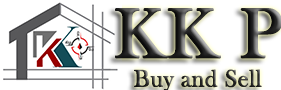
<style>
.page{position:relative;width:281px;height:90px;background:#ffffff}
.page>*{position:absolute;margin:0}
.t1{font:72.7px "BaskOldFace";font-weight:bold}
.t2{font:24.2px "BaskOldFace";color:#282828;font-weight:bold}
</style>
<div class="page">
<p class="t1" style="left:115px;top:8px;width:168px;height:51px">KK P</p>
<p class="t2" style="left:134px;top:69px;width:128px;height:23px">Buy and Sell</p>
</div>
